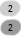
<style>
.page{position:relative;width:21px;height:37px;background:#cecccc}
.page>*{position:absolute;margin:0}
.t1{font:10.4px "KohinoorDevanagari-Light";color:#080808}
</style>
<div class="page">
<p class="t1" style="left:8px;top:4px;width:5px;height:8px">2</p>
<p class="t1" style="left:8px;top:23px;width:5px;height:8px">2</p>
</div>
